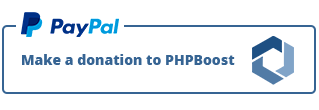
<style>
.page{position:relative;width:319px;height:110px;background:#ffffff}
.page>*{position:absolute;margin:0}
.t1{font:14px "OpenSans-Extrabold";color:#366493}
</style>
<div class="page">
<p class="t1" style="left:22px;top:54px;width:213px;height:11px">Make a donation to PHPBoost</p>
</div>
